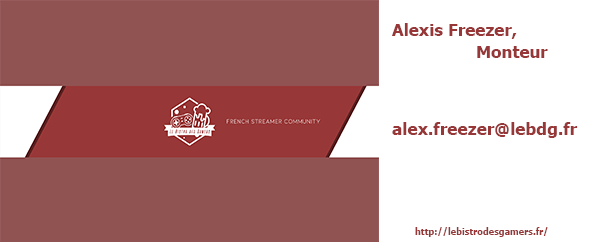
<style>
.page{position:relative;width:590px;height:242px;background:#915252}
.page>*{position:absolute;margin:0}
.t1{font:17px "Tahoma-Bold";color:#983737}
.t2{font:17.2px "Tahoma-Bold";color:#983737}
.t3{font:9.2px "Tahoma-Bold";color:#983737}
</style>
<div class="page">
<p class="t1" style="left:392px;top:23px;width:125px;height:16px">Alexis Freezer,</p>
<p class="t2" style="left:477px;top:46px;width:71px;height:12px">Monteur</p>
<p class="t2" style="left:392px;top:122px;width:186px;height:16px">alex.freezer@lebdg.fr</p>
<p class="t3" style="left:415px;top:227px;width:133px;height:10px">http://lebistrodesgamers.fr/</p>
</div>
